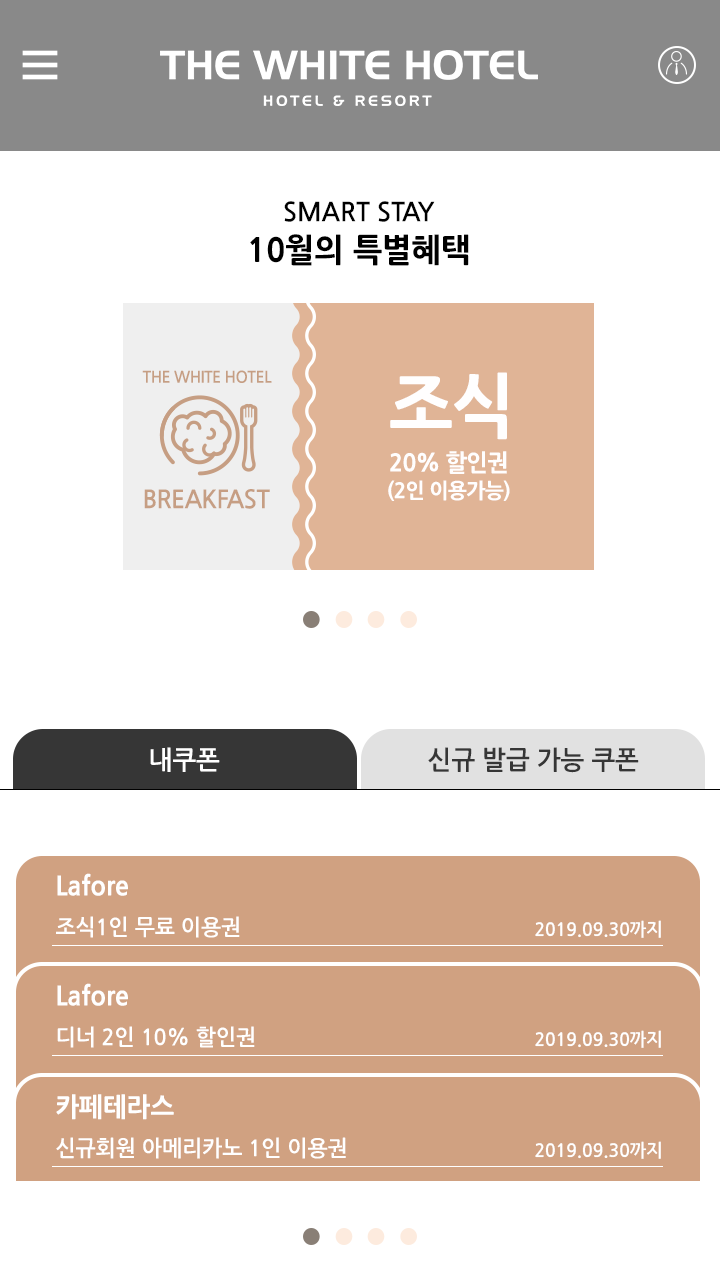
<style>
.page{position:relative;width:720px;height:1280px;background:#ffffff}
.page>*{position:absolute;margin:0}
.t1{font:26px/40px "NanumGothicBold";color:#000000}
.t2{font:32px/40px "NanumGothicExtraBold";color:#000000}
.t3{font:16px "NanumGothicBold";letter-spacing:-0.03em;color:#c69e83;text-transform:uppercase}
.t4{font:69.7px "NanumGothicExtraBold";letter-spacing:-0.03em;color:#fffefe}
.t5{font:20.8px/26.7px "NanumGothicExtraBold";letter-spacing:-0.03em;color:#fffefe}
.t6{font:23.4px/26.7px "NanumGothicExtraBold";letter-spacing:-0.03em;color:#fffefe}
.t7{font:25px "NanumGothicBold";letter-spacing:-0.03em;color:#c69e83;text-transform:uppercase}
.t8{font:26px "NanumGothicBold";color:#ffffff}
.t9{font:26px "NanumGothicBold";color:#363636}
.t10{font:22px/40px "NanumGothicBold";color:#ffffff}
.t11{font:26px/35px "NanumGothicExtraBold";color:#ffffff}
.t12{font:18px "NanumGothicBold";color:#ffffff}
</style>
<div class="page">
<p class="t1" style="left:250px;top:201px;width:219px;height:65px;text-align:center">SMART STAY<br><span class="t2">10월의 특별혜택</span></p>
<p class="t3" style="left:142px;top:370px;width:130px;height:13px">the white hotel</p>
<p class="t4" style="left:390px;top:372px;width:117px;height:68px">조식</p>
<p class="t5" style="left:388px;top:451px;width:122px;height:50px;text-align:center"><span class="t6">20% 할인권<br></span>(2인 이용가능)</p>
<p class="t7" style="left:144px;top:489px;width:126px;height:20px">breakfast</p>
<p class="t8" style="left:150px;top:747px;width:70px;height:25px">내쿠폰</p>
<p class="t9" style="left:428px;top:747px;width:211px;height:26px">신규 발급 가능 쿠폰</p>
<p class="t10" style="left:56px;top:873px;width:184px;height:65px"><span class="t11">Lafore<br></span>조식1인 무료 이용권</p>
<p class="t12" style="left:535px;top:920px;width:126px;height:18px">2019.09.30까지</p>
<p class="t10" style="left:57px;top:983px;width:198px;height:65px"><span class="t11">Lafore<br></span>디너 2인 10% 할인권</p>
<p class="t12" style="left:535px;top:1030px;width:126px;height:18px">2019.09.30까지</p>
<p class="t10" style="left:56px;top:1094px;width:290px;height:65px"><span class="t11">카페테라스<br></span>신규회원 아메리카노 1인 이용권</p>
<p class="t12" style="left:535px;top:1141px;width:126px;height:18px">2019.09.30까지</p>
</div>
